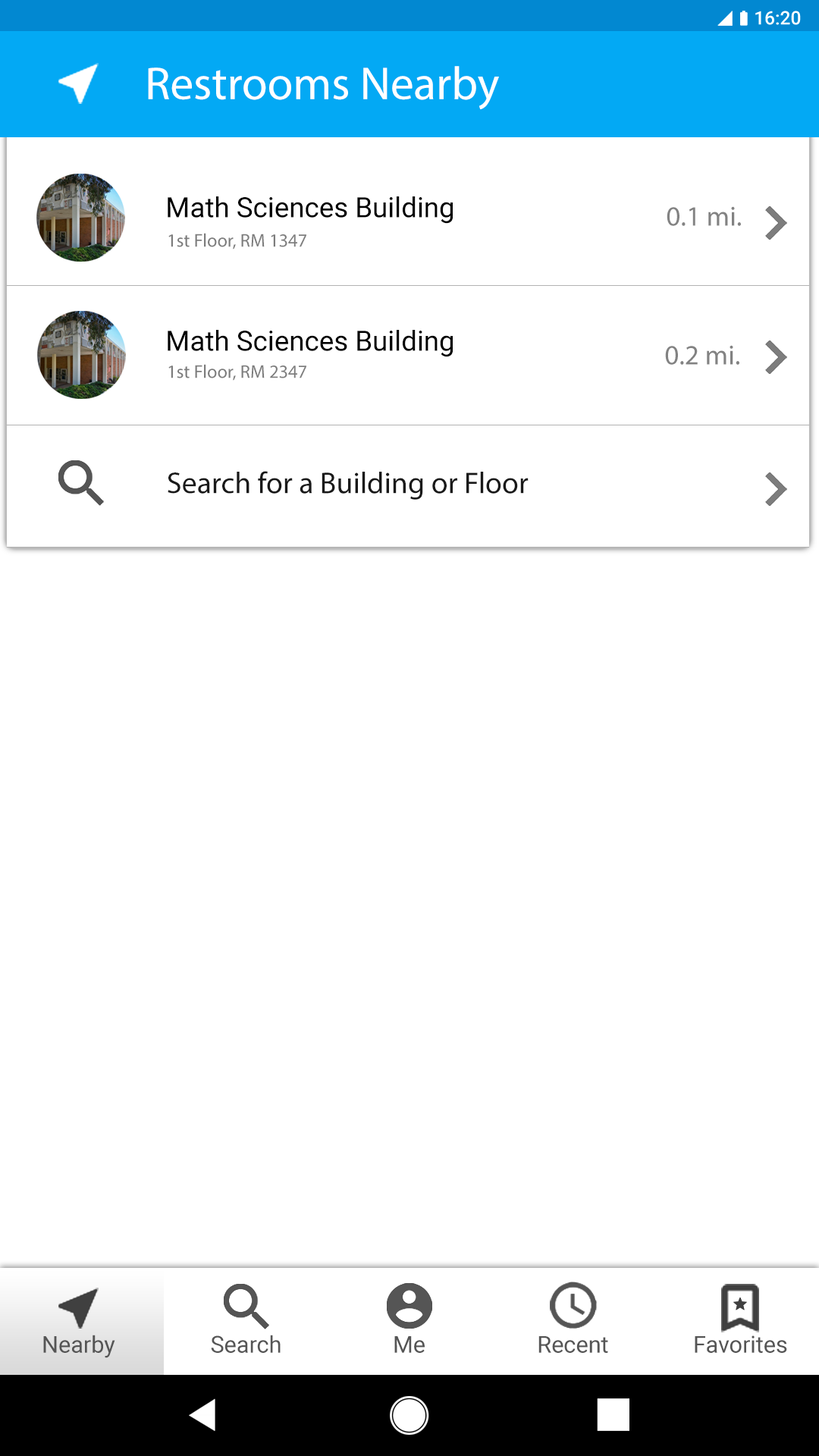
<style>
.page{position:relative;width:819px;height:1456px;background:#ffffff}
.page>*{position:absolute;margin:0}
.t1{font:46.4px "MyriadPro-Regular";color:#ffffff}
.t2{font:27.9px "Roboto-Regular";color:#000000}
.t3{font:27.9px "MyriadPro-Regular";color:#828282}
.t4{font:18.6px "MyriadPro-Regular";color:#7d7d7d}
.t5{font:30.2px "MyriadPro-Regular";color:#191919}
.t6{font:23.2px "Roboto-Regular";color:#555555}
</style>
<div class="page">
<p class="t1" style="left:148px;top:66px;width:351px;height:44px">Restrooms Nearby</p>
<p class="t2" style="left:168px;top:196px;width:285px;height:28px">Math Sciences Building</p>
<p class="t3" style="left:667px;top:206px;width:74px;height:20px">0.1 mi.</p>
<p class="t4" style="left:168px;top:233px;width:138px;height:16px">1st Floor, RM 1347</p>
<p class="t2" style="left:168px;top:330px;width:285px;height:27px">Math Sciences Building</p>
<p class="t3" style="left:665px;top:345px;width:74px;height:20px">0.2 mi.</p>
<p class="t4" style="left:168px;top:364px;width:138px;height:17px">1st Floor, RM 2347</p>
<p class="t5" style="left:168px;top:471px;width:361px;height:29px">Search for a Building or Floor</p>
<p class="t6" style="left:43px;top:1335px;width:72px;height:23px">Nearby</p>
<p class="t6" style="left:211px;top:1335px;width:70px;height:18px">Search</p>
<p class="t6" style="left:394px;top:1336px;width:31px;height:17px">Me</p>
<p class="t6" style="left:538px;top:1336px;width:70px;height:17px">Recent</p>
<p class="t6" style="left:695px;top:1335px;width:92px;height:18px">Favorites</p>
</div>
